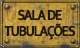
<style>
.page{position:relative;width:80px;height:48px}
.page>*{position:absolute;margin:0}
.t1{font:15px/15.9px "Corbel-Bold";letter-spacing:-0.14em;color:#1f180a;text-transform:uppercase;font-weight:bold;scale:0.85 1}
</style>
<div class="page">
<p class="t1" style="left:4px;top:9px;width:72px;height:31px;text-align:center">Sala  de<br>tubulações</p>
</div>
